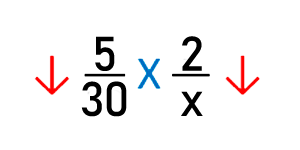
<style>
.page{position:relative;width:300px;height:150px;background:#ffffff}
.page>*{position:absolute;margin:0}
.t1{font:48px "Bahnschrift";letter-spacing:-0.04em;color:#000000;font-style:italic}
</style>
<div class="page">
<p class="t1" style="left:95px;top:36px;width:20px;height:35px">5</p>
<p class="t1" style="left:182px;top:36px;width:20px;height:35px">2</p>
<p class="t1" style="left:81px;top:81px;width:46px;height:36px">30</p>
<p class="t1" style="left:181px;top:91px;width:22px;height:25px">x</p>
</div>
